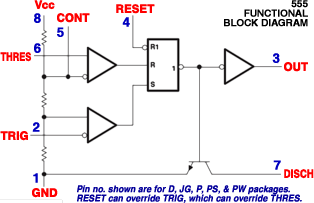
<style>
.page{position:relative;width:314px;height:203px;background:#ffffff}
.page>*{position:absolute;margin:0}
.t1{font:11.4px "Helvetica-Bold";letter-spacing:-0.01em;color:#ff0000;font-weight:bold}
.t2{font:9.6px/9.6px "Helvetica-Bold";letter-spacing:-0.01em;color:#000000;text-transform:uppercase;font-weight:bold}
.t3{font:12.9px "Helvetica-Bold";letter-spacing:-0.01em;color:#0000bf;font-weight:bold}
.t4{font:11.4px "Helvetica-Bold";letter-spacing:-0.01em;color:#ff0000;font-weight:bold;scale:0.78 1}
.t5{font:11.4px "Helvetica-Bold";letter-spacing:-0.01em;color:#ff0000;font-weight:bold;scale:0.83 1}
.t6{font:9.2px/9.1px "Helvetica-BoldOblique";letter-spacing:-0.01em;color:#04009a;font-weight:bold;scale:0.93 1}
</style>
<div class="page">
<p class="t1" style="left:34px;top:0px;width:21px;height:10px">Vcc</p>
<p class="t1" style="left:116px;top:4px;width:39px;height:10px">RESET</p>
<p class="t2" style="left:224px;top:0px;width:84px;height:27px;text-align:right">555<br>Functional<br>Block Diagram</p>
<p class="t3" style="left:34px;top:13px;width:7px;height:10px">8</p>
<p class="t1" style="left:57px;top:13px;width:33px;height:10px">CONT</p>
<p class="t3" style="left:122px;top:17px;width:8px;height:10px">4</p>
<p class="t3" style="left:57px;top:27px;width:7px;height:10px">5</p>
<p class="t4" style="left:0px;top:52px;width:32px;height:10px">THRES</p>
<p class="t3" style="left:34px;top:43px;width:7px;height:10px">6</p>
<p class="t3" style="left:272px;top:53px;width:8px;height:10px">3</p>
<p class="t1" style="left:284px;top:62px;width:24px;height:10px">OUT</p>
<p class="t3" style="left:32px;top:122px;width:8px;height:10px">2</p>
<p class="t1" style="left:0px;top:131px;width:28px;height:10px">TRIG</p>
<p class="t3" style="left:273px;top:160px;width:8px;height:10px">7</p>
<p class="t3" style="left:33px;top:173px;width:5px;height:10px">1</p>
<p class="t5" style="left:284px;top:169px;width:30px;height:10px">DISCH</p>
<p class="t6" style="left:77px;top:185px;width:225px;height:18px">Pin no. shown are for D, JG, P, PS, &amp; PW packages.<br>RESET can override TRIG, which can override THRES.</p>
<p class="t1" style="left:32px;top:188px;width:26px;height:10px">GND</p>
</div>
